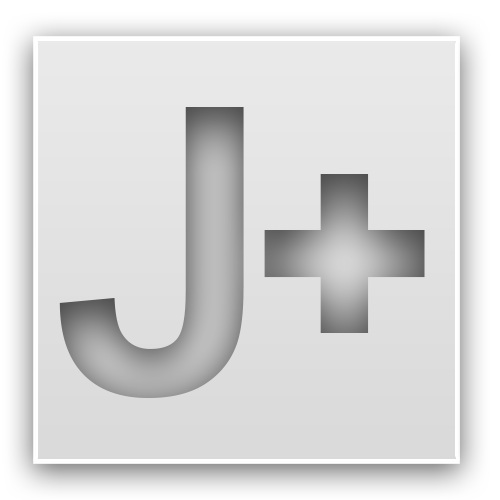
<style>
.page{position:relative;width:500px;height:500px}
.page>*{position:absolute;margin:0}
.t1{font:398.9px "Arial-BoldMT"}
.t2{font:299.2px "Arial-Black"}
</style>
<div class="page">
<p class="t1" style="left:59px;top:107px;width:185px;height:291px">J</p>
<p class="t2" style="left:264px;top:174px;width:161px;height:159px">+</p>
</div>
